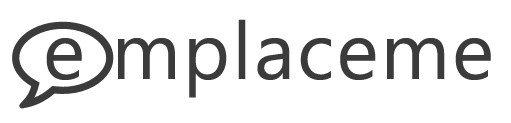
<style>
.page{position:relative;width:511px;height:123px;background:#ffffff}
.page>*{position:absolute;margin:0}
.t1{font:80px "Ebrima";letter-spacing:0.03em;color:#3b3b3b}
</style>
<div class="page">
<p class="t1" style="left:46px;top:19px;width:445px;height:79px">e mplaceme</p>
</div>
